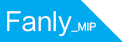
<style>
.page{position:relative;width:123px;height:42px;background:#00aaee}
.page>*{position:absolute;margin:0}
.t1{font:26px "MI-LANTING_GB-OUTSIDE-YS";color:#ffffff}
.t2{font:10px "MI-LANTING_GB-OUTSIDE-YS";color:#ffffff}
</style>
<div class="page">
<p class="t1" style="left:7px;top:11px;width:89px;height:26px">Fanly<span class="t2">_MIP</span></p>
</div>
